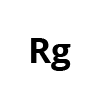
<style>
.page{position:relative;width:100px;height:100px;background:#ffffff}
.page>*{position:absolute;margin:0}
.t1{font:35px "OpenSans-Bold";color:#000000}
</style>
<div class="page">
<p class="t1" style="left:31px;top:38px;width:40px;height:33px">Rg</p>
</div>
